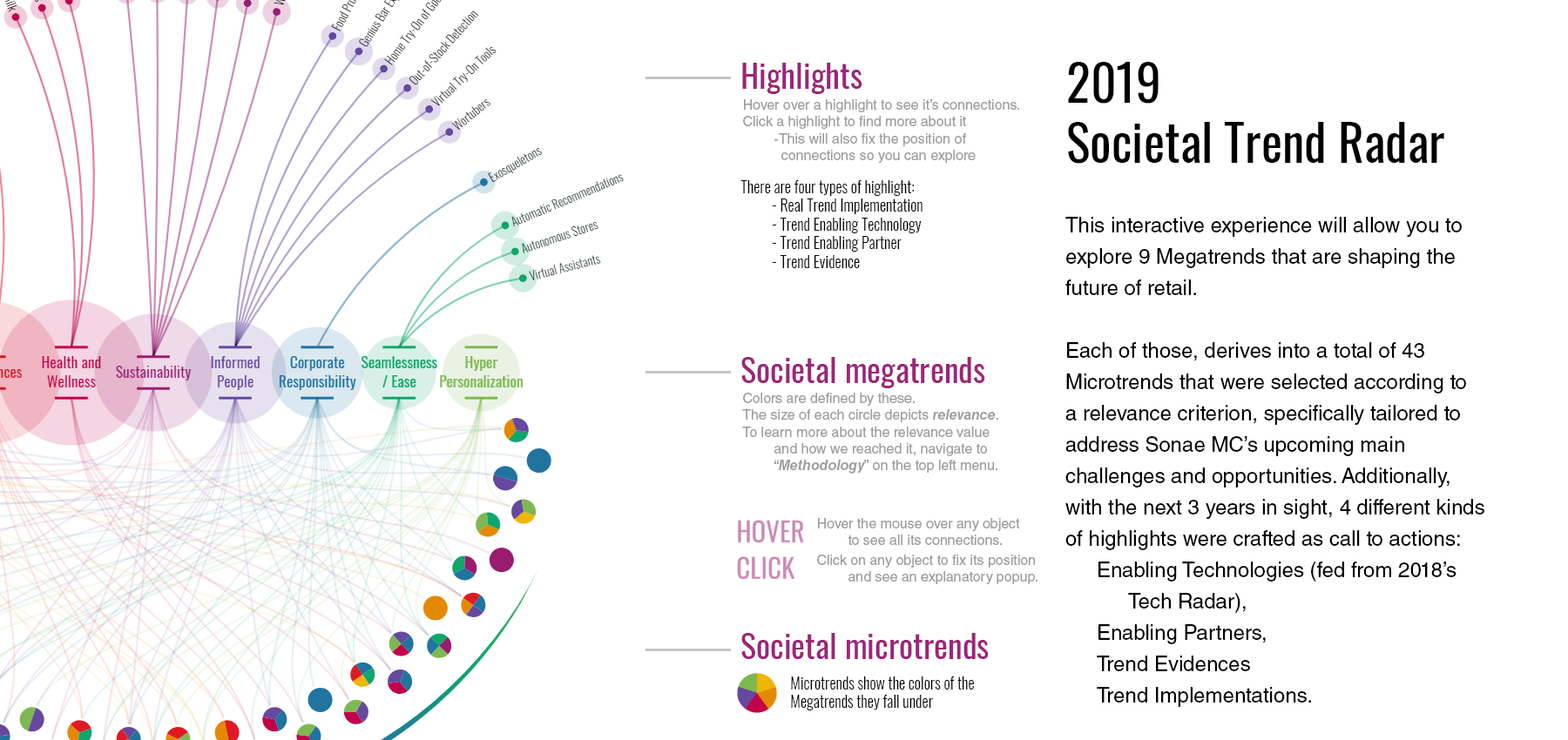
<style>
.page{position:relative;width:1568px;height:740px;background:#ffffff}
.page>*{position:absolute;margin:0}
.t1{font:33.1px "Oswald-Regular";color:#9d2577}
.t2{font:50.2px "Oswald-Regular";color:#000000}
.t3{font:13.9px "HelveticaLTStd-Roman";color:#9d9d9d}
.t4{font:15.7px "Oswald-Light";color:#000000}
.t5{font:20.9px/31.4px "HelveticaLTStd-Roman";color:#000000}
.t6{font:13.9px "HelveticaLTStd-BoldObl";color:#9d9d9d}
</style>
<div class="page">
<p class="t1" style="left:742px;top:63px;width:120px;height:31px">Highlights</p>
<p class="t2" style="left:1068px;top:62px;width:376px;height:102px">2019<br>Societal Trend Radar</p>
<p class="t3" style="left:743px;top:99px;width:276px;height:64px">Hover over a highlight to see it’s connections.<br>Click a highlight to find more about it<br> -This will also fix the position of<br>          connections so you can explore</p>
<p class="t4" style="left:740px;top:180px;width:183px;height:88px">There are four types of highlight:<br> - Real Trend Implementation<br> - Trend Enabling Technology<br> - Trend Enabling Partner<br> - Trend Evidence</p>
<p class="t5" style="left:1065px;top:217px;width:419px;height:490px">This interactive experience will allow you to<br>explore 9 Megatrends that are shaping the<br>future of retail.<br><br>Each of those, derives into a total of 43<br>Microtrends that were selected according to<br>a relevance criterion, specifically tailored to<br>address Sonae MC’s upcoming main<br>challenges and opportunities. Additionally,<br>with the next 3 years in sight, 4 different kinds<br>of highlights were crafted as call to actions:<br> Enabling Technologies (fed from 2018’s<br>  Tech Radar),<br> Enabling Partners,<br> Trend Evidences<br> Trend Implementations.</p>
<p class="t1" style="left:741px;top:357px;width:244px;height:32px">Societal megatrends</p>
<p class="t3" style="left:742px;top:393px;width:256px;height:81px">Colors are defined by these.<br>The size of each circle depicts <span class="t6">relevance</span>.<br>To learn more about the relevance value<br> and how we reached it, navigate to<br> “<span class="t6">Methodology</span>” on the top left menu.</p>
<p class="t3" style="left:818px;top:518px;width:202px;height:27px">Hover the mouse over any object<br> to see all its connections.</p>
<p class="t3" style="left:817px;top:555px;width:220px;height:30px">Click on any object to fix its position<br> and see an explanatory popup.</p>
<p class="t1" style="left:741px;top:633px;width:248px;height:26px">Societal microtrends</p>
<p class="t4" style="left:791px;top:677px;width:183px;height:34px">Microtrends show the colors of the<br>Megatrends they fall under</p>
</div>
